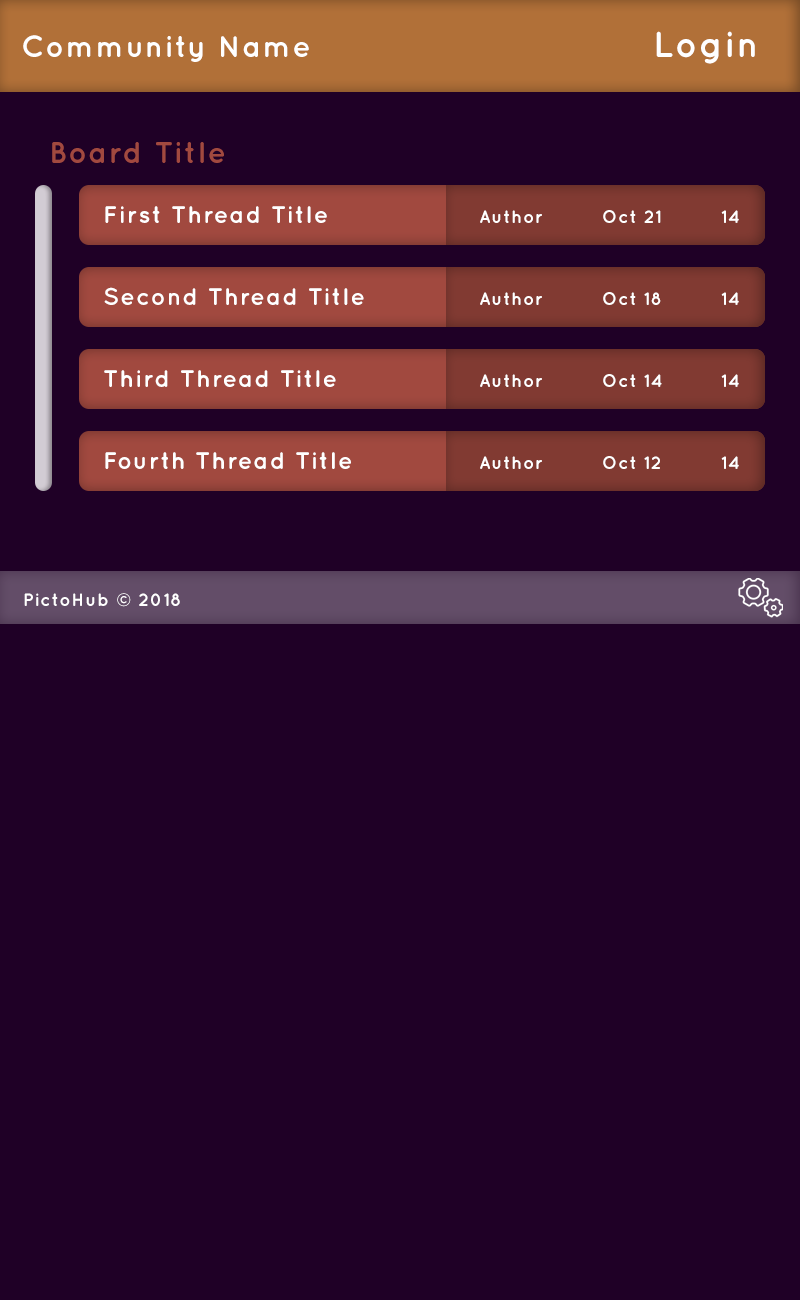
<style>
.page{position:relative;width:800px;height:1300px;background:#1f0026}
.page>*{position:absolute;margin:0}
.t1{font:30px "Quicksand-Bold";letter-spacing:0.05em;color:#ffffff}
.t2{font:36px "Quicksand-Bold";letter-spacing:0.05em;color:#ffffff}
.t3{font:30px "Quicksand-Bold";letter-spacing:0.05em;color:#a1493f}
.t4{font:24px "Quicksand-Bold";letter-spacing:0.05em;color:#ffffff}
.t5{font:18px "Quicksand-Bold";letter-spacing:0.05em;color:#ffffff}
</style>
<div class="page">
<p class="t1" style="left:23px;top:35px;width:286px;height:27px">Community Name</p>
<p class="t2" style="left:656px;top:31px;width:99px;height:33px">Login</p>
<p class="t3" style="left:52px;top:142px;width:172px;height:21px">Board Title</p>
<p class="t4" style="left:105px;top:206px;width:222px;height:17px">First Thread Title</p>
<p class="t5" style="left:480px;top:210px;width:62px;height:13px">Author</p>
<p class="t5" style="left:603px;top:210px;width:58px;height:13px">Oct 21</p>
<p class="t5" style="left:721px;top:210px;width:18px;height:13px">14</p>
<p class="t4" style="left:104px;top:287px;width:260px;height:18px">Second Thread Title</p>
<p class="t5" style="left:480px;top:292px;width:62px;height:13px">Author</p>
<p class="t5" style="left:603px;top:292px;width:58px;height:13px">Oct 18</p>
<p class="t5" style="left:721px;top:292px;width:18px;height:13px">14</p>
<p class="t4" style="left:104px;top:370px;width:232px;height:17px">Third Thread Title</p>
<p class="t5" style="left:480px;top:374px;width:62px;height:13px">Author</p>
<p class="t5" style="left:603px;top:374px;width:59px;height:13px">Oct 14</p>
<p class="t5" style="left:721px;top:374px;width:18px;height:13px">14</p>
<p class="t4" style="left:105px;top:452px;width:246px;height:17px">Fourth Thread Title</p>
<p class="t5" style="left:480px;top:456px;width:62px;height:13px">Author</p>
<p class="t5" style="left:603px;top:456px;width:57px;height:13px">Oct 12</p>
<p class="t5" style="left:721px;top:456px;width:18px;height:13px">14</p>
<p class="t5" style="left:24px;top:593px;width:156px;height:14px">PictoHub © 2018</p>
</div>
